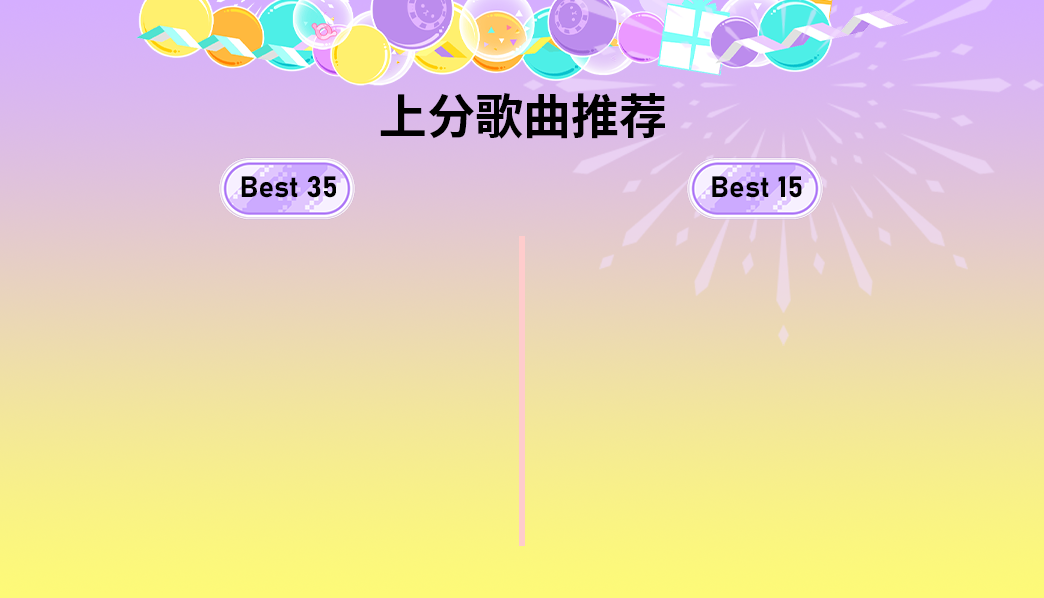
<style>
.page{position:relative;width:1044px;height:598px}
.page>*{position:absolute;margin:0}
.t1{font:48px "SourceHanSansSC-Bold";color:#000000}
.t2{font:29.3px "Bahnschrift-Bold";color:#000000}
</style>
<div class="page">
<p class="t1" style="left:380px;top:93px;width:285px;height:46px">上分歌曲推荐</p>
<p class="t2" style="left:241px;top:176px;width:95px;height:22px">Best 35</p>
<p class="t2" style="left:712px;top:176px;width:90px;height:22px">Best 15</p>
</div>
